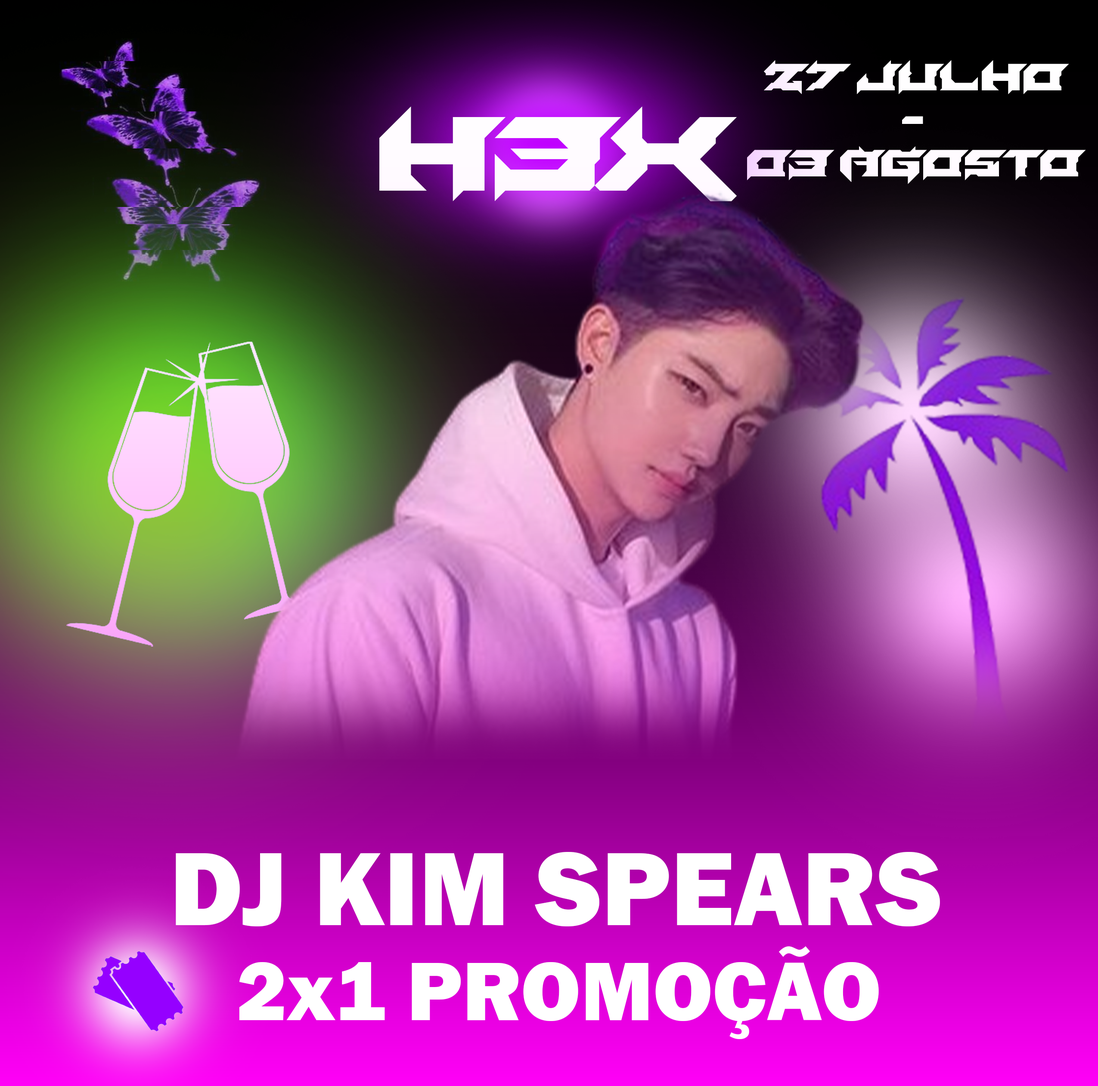
<style>
.page{position:relative;width:1098px;height:1086px}
.page>*{position:absolute;margin:0}
.t1{font:38.7px/43px "Laceration";color:#ffffff}
.t2{font:107.6px "Laceration";color:#ffffff}
.t3{font:107.6px "FranklinGothic-Heavy";color:#ffffff}
.t4{font:86.1px "FranklinGothic-Heavy";color:#ffffff}
</style>
<div class="page">
<p class="t1" style="left:747px;top:60px;width:339px;height:124px;text-align:center">27 Julho<br>-<br>03 Agosto</p>
<p class="t2" style="left:379px;top:106px;width:357px;height:95px">H3X</p>
<p class="t3" style="left:176px;top:852px;width:764px;height:75px">DJ KIM SPEARS</p>
<p class="t4" style="left:239px;top:947px;width:640px;height:92px">2x1 PROMOÇÃO</p>
</div>
